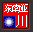
<style>
.page{position:relative;width:33px;height:32px;background:#f20000}
.page>*{position:absolute;margin:0}
.t1{font:10.4px "SimSun";letter-spacing:-0.25em;color:#ffffff}
.t2{font:11.7px "SimSun";color:#ffffff}
</style>
<div class="page">
<p class="t1" style="left:4px;top:4px;width:24px;height:9px">东南亚</p>
<p class="t2" style="left:16px;top:15px;width:11px;height:12px">川</p>
</div>
